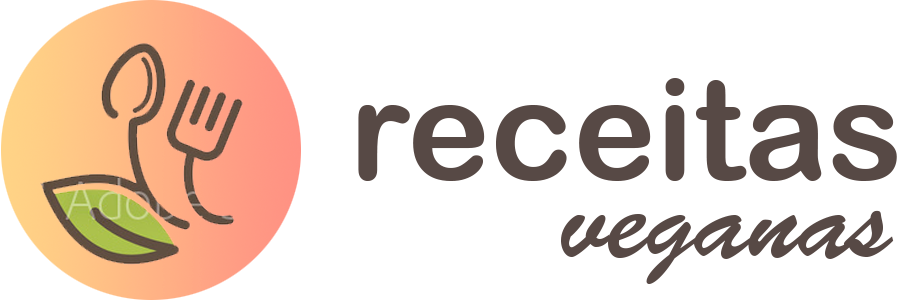
<style>
.page{position:relative;width:918px;height:300px;background:#ffffff}
.page>*{position:absolute;margin:0}
.t1{font:140px "ArialRoundedMTBold";color:#574945}
.t2{font:110px "BrushScriptStd";color:#574945}
</style>
<div class="page">
<p class="t1" style="left:358px;top:78px;width:539px;height:103px">receitas</p>
<p class="t2" style="left:561px;top:210px;width:333px;height:74px">veganas</p>
</div>
